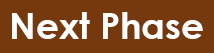
<style>
.page{position:relative;width:214px;height:53px;background:#76390d}
.page>*{position:absolute;margin:0}
.t1{font:36px "CenturyGothic-Bold";color:#ffffff}
</style>
<div class="page">
<p class="t1" style="left:12px;top:12px;width:191px;height:27px">Next Phase</p>
</div>
